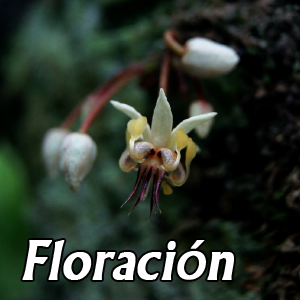
<style>
.page{position:relative;width:300px;height:300px}
.page>*{position:absolute;margin:0}
.t1{font:55.6px "Narkisim";color:#ffffff;font-weight:bold;font-style:italic}
.t2{font:55.6px "MyriadPro-Regular";color:#ffffff;font-weight:bold;font-style:italic}
</style>
<div class="page">
<p class="t1" style="left:22px;top:240px;width:212px;height:40px">Floraci<span class="t2">ó</span>n</p>
</div>
